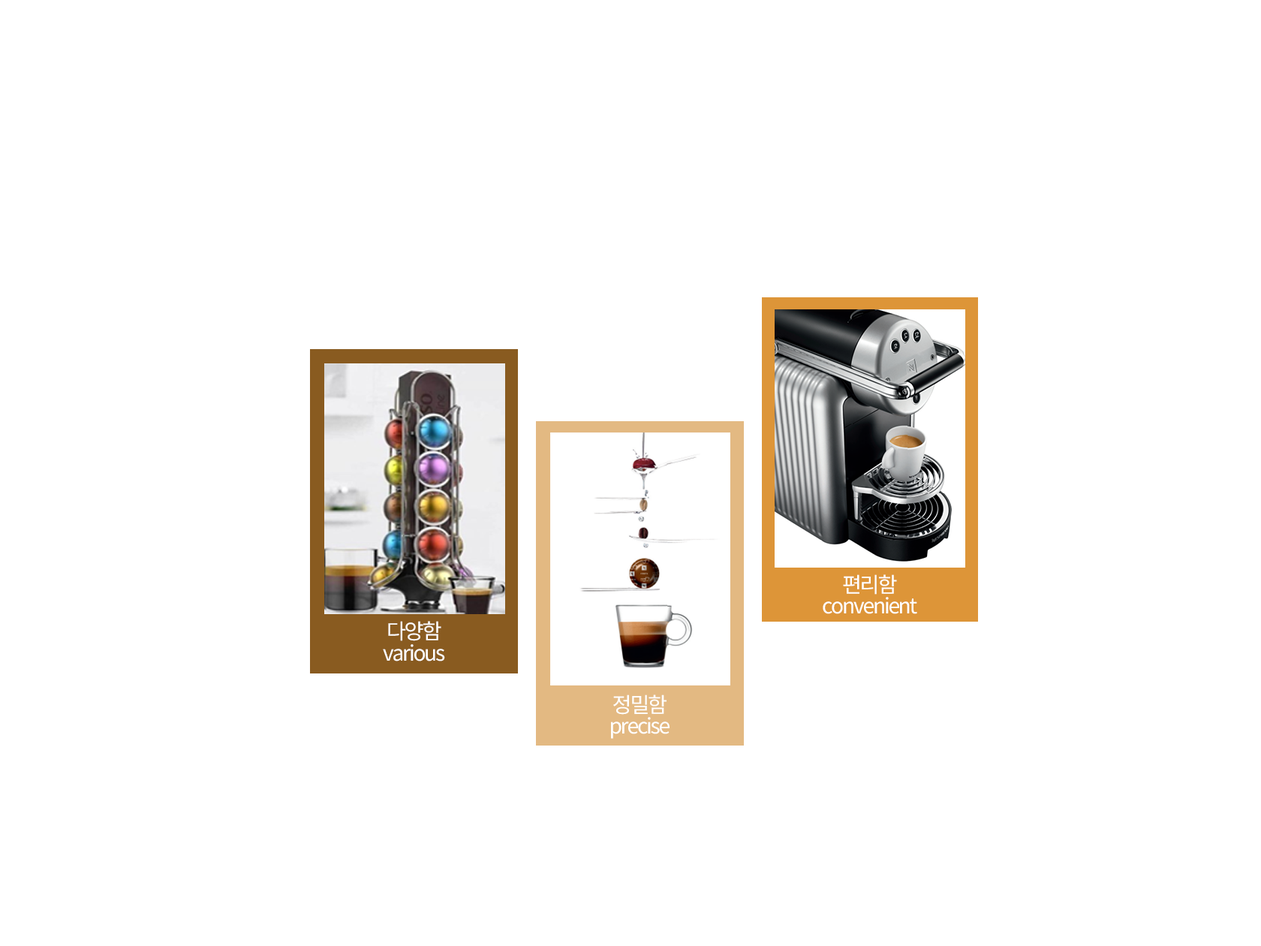
<style>
.page{position:relative;width:1261px;height:946px;background:#ffffff}
.page>*{position:absolute;margin:0}
.t1{font:21.2px/21.2px "NotoSansKR-Regular";letter-spacing:-0.08em;color:#ffffff}
</style>
<div class="page">
<p class="t1" style="left:823px;top:574px;width:94px;height:40px;text-align:center">편리함<br>convenient</p>
<p class="t1" style="left:383px;top:621px;width:62px;height:40px;text-align:center">다양함<br>various</p>
<p class="t1" style="left:611px;top:694px;width:58px;height:45px;text-align:center">정밀함<br>precise</p>
</div>
